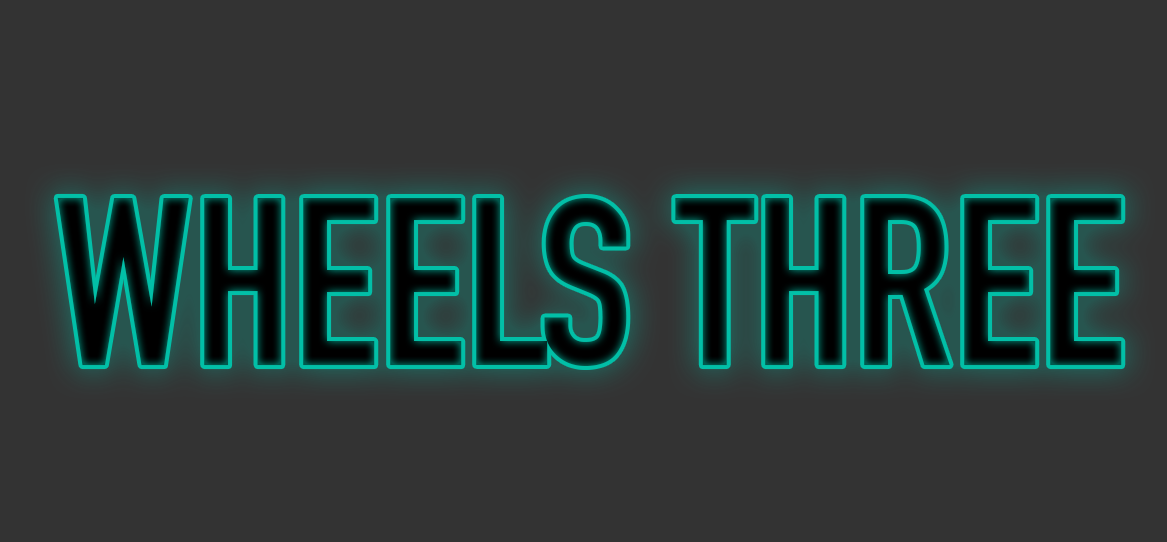
<style>
.page{position:relative;width:1167px;height:542px;background:#333333}
.page>*{position:absolute;margin:0}
.t1{font:233.7px "DINEngschrift";text-transform:uppercase}
</style>
<div class="page">
<p class="t1" style="left:57px;top:197px;width:1065px;height:169px">wheels three</p>
</div>
